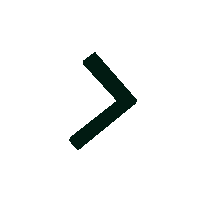
<style>
.page{position:relative;width:200px;height:200px;background:#ffffff}
.page>*{position:absolute;margin:0}
.t1{font:133.3px "H2porM";letter-spacing:-0.05em;color:#011b12;font-weight:bold;font-style:italic}
</style>
<div class="page">
<p class="t1" style="left:69px;top:52px;width:68px;height:98px">&gt;</p>
</div>
